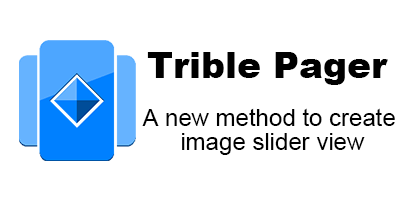
<style>
.page{position:relative;width:400px;height:200px;background:#ffffff}
.page>*{position:absolute;margin:0}
.t1{font:36px "Arial-Black";color:#000000}
.t2{font:24px/24px "ArialMT";color:#000000}
</style>
<div class="page">
<p class="t1" style="left:147px;top:52px;width:241px;height:33px">Trible Pager</p>
<p class="t2" style="left:142px;top:108px;width:253px;height:47px;text-align:center">A new method to create<br> image slider view</p>
</div>
